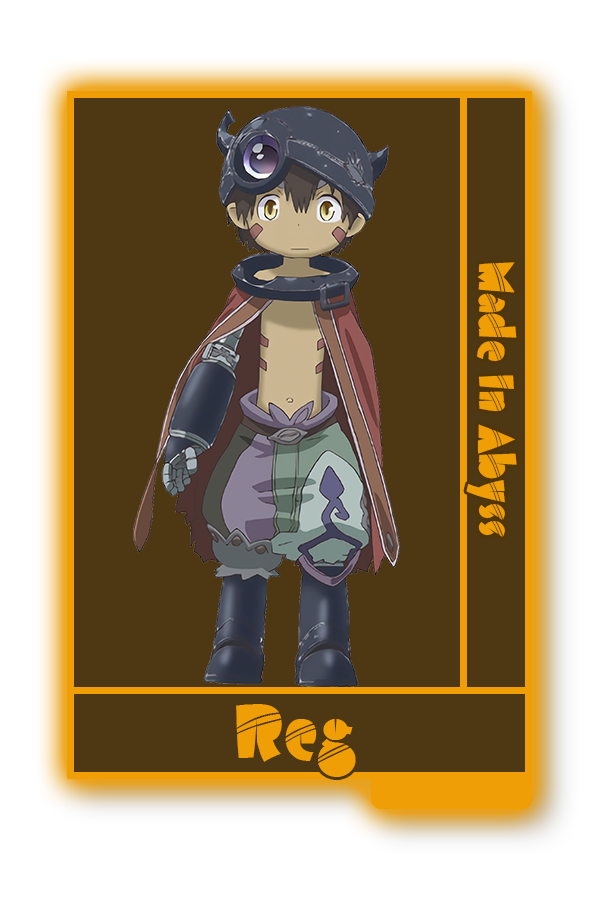
<style>
.page{position:relative;width:600px;height:900px;background:#4e3713}
.page>*{position:absolute;margin:0}
.t1{font:48.8px "AirmoleStripe";color:#f09e06}
.t2{font:75px "AirmoleStripe";color:#f09e06}
</style>
<div class="page">
<p class="t1" style="left:466px;top:262px;width:51px;height:275px;rotate:90deg">Made In Abyss</p>
<p class="t2" style="left:236px;top:704px;width:120px;height:73px">Reg</p>
</div>
